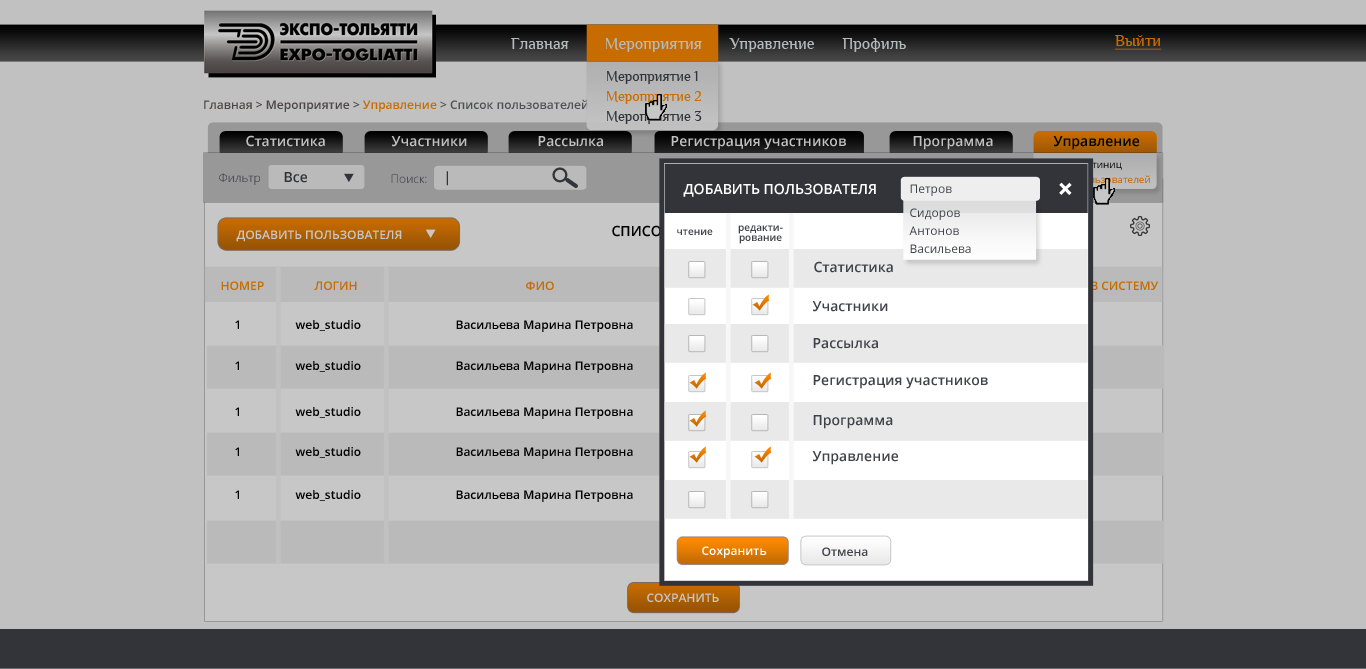
<style>
.page{position:relative;width:1366px;height:669px;background:#c1c1c1}
.page>*{position:absolute;margin:0}
.t1{font:16.5px "Philosopher";color:#b4bbbc}
.t2{font:16px "Philosopher";color:#c76c00;text-decoration:underline}
.t3{font:14.4px/20px "Philosopher";color:#40434a}
.t4{font:14.4px/20px "Philosopher";color:#ff8a00}
.t5{font:12px "OpenSans-Semibold";color:#615a59}
.t6{font:12px "OpenSans-Semibold";color:#ff8a00}
.t7{font:12px "OpenSans-Semibold";color:#65676a}
.t8{font:14px "OpenSans-Semibold";color:#c1c1c1}
.t9{font:14px "OpenSans-Semibold";color:#020202}
.t10{font:12px "OpenSans-Light";color:#40434a}
.t11{font:14px "OpenSans-Semibold";color:#40434a}
.t12{font:14px "OpenSans-Semibold";color:#ffffff;text-transform:uppercase}
.t13{font:12px "OpenSans";color:#40434a}
.t14{font:10px "OpenSans"}
.t15{font:29.7px "OpenSans-Bold";color:#ffffff;text-transform:uppercase}
.t16{font:12px/18px "OpenSans";color:#40434a}
.t17{font:12px "OpenSans-Semibold";color:#c7c7c7;text-transform:uppercase}
.t18{font:10px "OpenSans-Semibold";color:#40434a}
.t19{font:10px/10px "OpenSans-Semibold";color:#40434a}
.t20{font:12px "OpenSans-Semibold";color:#c76c00;text-transform:uppercase}
.t21{font:12px "OpenSans-Semibold";color:#000000}
.t22{font:12px "OpenSans-Semibold";color:#ffffff}
.t23{font:12px "OpenSans-Semibold";color:#40434a}
.t24{font:12px "OpenSans-Semibold";color:#c7c7c7}
</style>
<div class="page">
<p class="t1" style="left:511px;top:38px;width:395px;height:14px">Главная         Мероприятия       Управление       Профиль</p>
<p class="t2" style="left:1115px;top:35px;width:47px;height:15px">Выйти</p>
<p class="t3" style="left:607px;top:71px;width:95px;height:53px">Мероприятие 1<br><span class="t4">Мероприятие 2<br></span>Мероприятие 3</p>
<p class="t5" style="left:204px;top:99px;width:384px;height:13px">Главная &gt; Мероприятие &gt; <span class="t6">Управление </span><span class="t7">&gt; Список пользователей</span></p>
<p class="t8" style="left:246px;top:135px;width:79px;height:12px">Статистика</p>
<p class="t8" style="left:391px;top:136px;width:76px;height:11px">Участники</p>
<p class="t8" style="left:538px;top:136px;width:65px;height:11px">Рассылка</p>
<p class="t8" style="left:671px;top:136px;width:175px;height:14px">Регистрация участников</p>
<p class="t8" style="left:913px;top:136px;width:80px;height:14px">Программа</p>
<p class="t9" style="left:1053px;top:136px;width:86px;height:14px">Управление</p>
<p class="t10" style="left:219px;top:173px;width:41px;height:12px">Фильтр</p>
<p class="t11" style="left:284px;top:172px;width:23px;height:11px">Все</p>
<p class="t10" style="left:391px;top:174px;width:36px;height:9px">Поиск:</p>
<p class="t11" style="left:446px;top:171px;width:2px;height:15px">|</p>
<p class="t12" style="left:683px;top:183px;width:193px;height:14px">ДОБАВИТЬ пользователя</p>
<p class="t13" style="left:910px;top:184px;width:42px;height:12px">Петров</p>
<p class="t14" style="left:1040px;top:175px;width:110px;height:8px">Список пользователей</p>
<p class="t15" style="left:1059px;top:182px;width:13px;height:13px;rotate:46deg">+</p>
<p class="t16" style="left:909px;top:208px;width:62px;height:45px">Сидоров<br>Антонов<br>Васильева</p>
<p class="t17" style="left:236px;top:230px;width:166px;height:12px">Добавить пользователя</p>
<p class="t18" style="left:677px;top:229px;width:36px;height:6px">чтение</p>
<p class="t19" style="left:738px;top:225px;width:45px;height:19px;text-align:center">редакти-<br>рование</p>
<p class="t11" style="left:814px;top:261px;width:79px;height:12px">Статистика</p>
<p class="t20" style="left:221px;top:281px;width:43px;height:9px">номер</p>
<p class="t20" style="left:314px;top:281px;width:43px;height:9px">ЛОГИН</p>
<p class="t20" style="left:526px;top:281px;width:28px;height:9px">ФИО</p>
<p class="t11" style="left:812px;top:301px;width:76px;height:11px">Участники</p>
<p class="t21" style="left:235px;top:320px;width:4px;height:9px">1</p>
<p class="t21" style="left:295px;top:320px;width:66px;height:11px">web_studio</p>
<p class="t21" style="left:456px;top:320px;width:177px;height:12px">Васильева Марина Петровна</p>
<p class="t11" style="left:813px;top:338px;width:65px;height:11px">Рассылка</p>
<p class="t21" style="left:235px;top:361px;width:4px;height:9px">1</p>
<p class="t21" style="left:295px;top:361px;width:66px;height:11px">web_studio</p>
<p class="t21" style="left:456px;top:361px;width:177px;height:12px">Васильева Марина Петровна</p>
<p class="t11" style="left:813px;top:375px;width:175px;height:14px">Регистрация участников</p>
<p class="t21" style="left:235px;top:407px;width:4px;height:9px">1</p>
<p class="t21" style="left:295px;top:407px;width:66px;height:11px">web_studio</p>
<p class="t21" style="left:456px;top:407px;width:177px;height:12px">Васильева Марина Петровна</p>
<p class="t11" style="left:813px;top:415px;width:80px;height:14px">Программа</p>
<p class="t21" style="left:235px;top:447px;width:4px;height:9px">1</p>
<p class="t21" style="left:295px;top:447px;width:66px;height:11px">web_studio</p>
<p class="t21" style="left:456px;top:447px;width:177px;height:12px">Васильева Марина Петровна</p>
<p class="t11" style="left:812px;top:451px;width:86px;height:14px">Управление</p>
<p class="t21" style="left:235px;top:490px;width:4px;height:9px">1</p>
<p class="t21" style="left:295px;top:490px;width:66px;height:11px">web_studio</p>
<p class="t21" style="left:456px;top:490px;width:177px;height:12px">Васильева Марина Петровна</p>
<p class="t22" style="left:702px;top:546px;width:65px;height:12px">Сохранить</p>
<p class="t23" style="left:822px;top:547px;width:46px;height:9px">Отмена</p>
<p class="t24" style="left:647px;top:593px;width:72px;height:9px">СОХРАНИТЬ</p>
</div>
